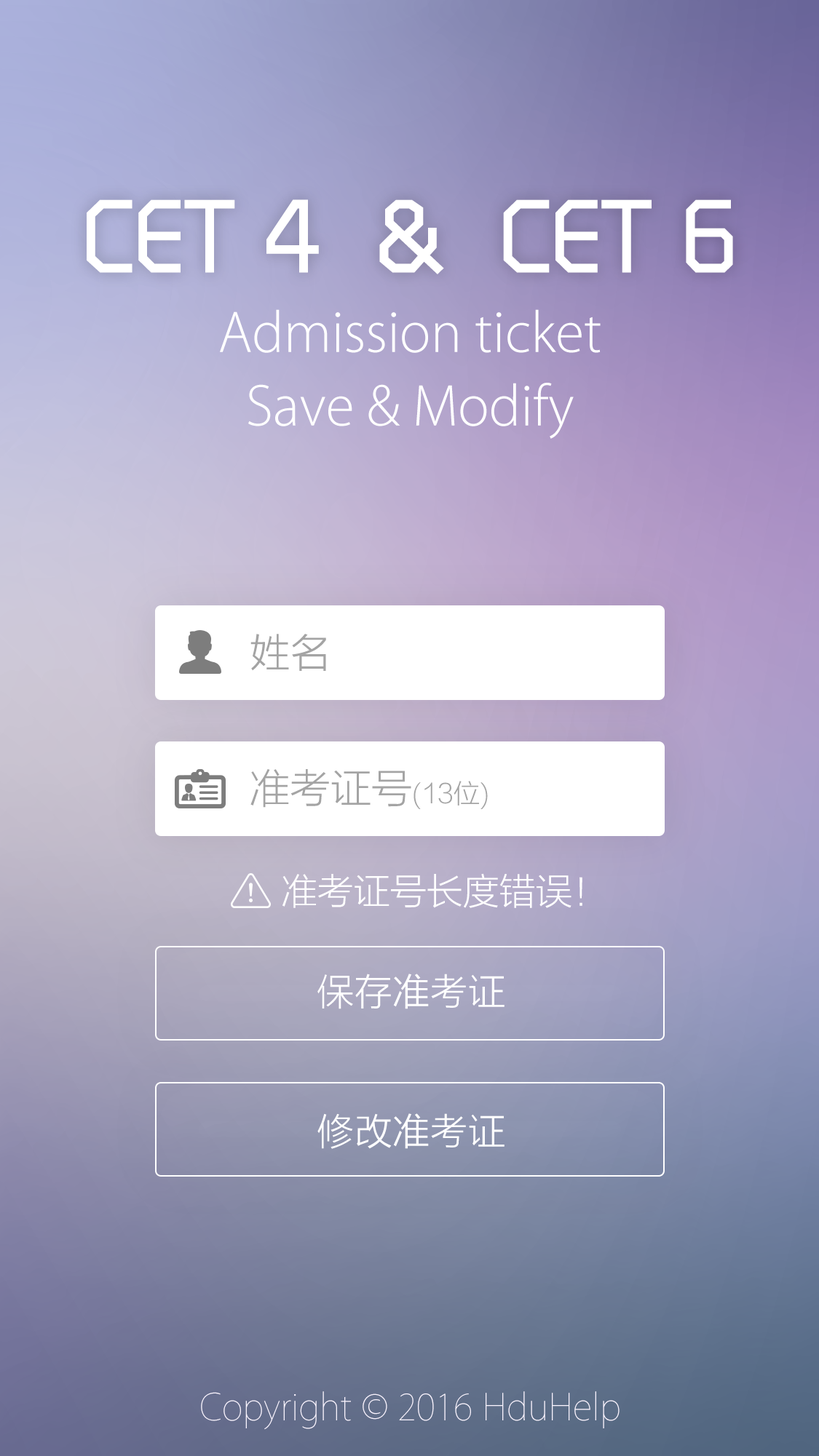
<style>
.page{position:relative;width:819px;height:1456px}
.page>*{position:absolute;margin:0}
.t1{font:105.5px "RTWSShangGoG0v1-Regular";color:#ffffff}
.t2{font:59.5px/73.5px "MyriadSetPro-Thin";color:#ffffff}
.t3{font:40.8px "FZLTXHK";color:#a4a4a4}
.t4{font:26.2px "FZLTXHK--GBK1-0";color:#a4a4a4}
.t5{font:40.8px "FZLTXHK--GBK1-0";color:#a4a4a4}
.t6{font:36.4px "FZLTXHK--GBK1-0";color:#ffffff}
.t7{font:37.8px "FZLTXHK";color:#ffffff}
.t8{font:40.8px "MyriadSetPro-Ultralight";color:#f9f4ff}
</style>
<div class="page">
<p class="t1" style="left:87px;top:199px;width:646px;height:75px">CET 4  &amp;  CET 6</p>
<p class="t2" style="left:220px;top:309px;width:380px;height:130px;text-align:center">Admission ticket<br>Save &amp; Modify</p>
<p class="t3" style="left:250px;top:634px;width:76px;height:37px">姓名</p>
<p class="t4" style="left:250px;top:769px;width:238px;height:40px"><span class="t5">准考证号</span>(13位)</p>
<p class="t6" style="left:282px;top:873px;width:300px;height:35px">准考证号长度错误！</p>
<p class="t7" style="left:317px;top:974px;width:187px;height:35px">保存准考证</p>
<p class="t7" style="left:317px;top:1114px;width:187px;height:35px">修改准考证</p>
<p class="t8" style="left:201px;top:1392px;width:418px;height:38px">Copyright © 2016 HduHelp</p>
</div>
